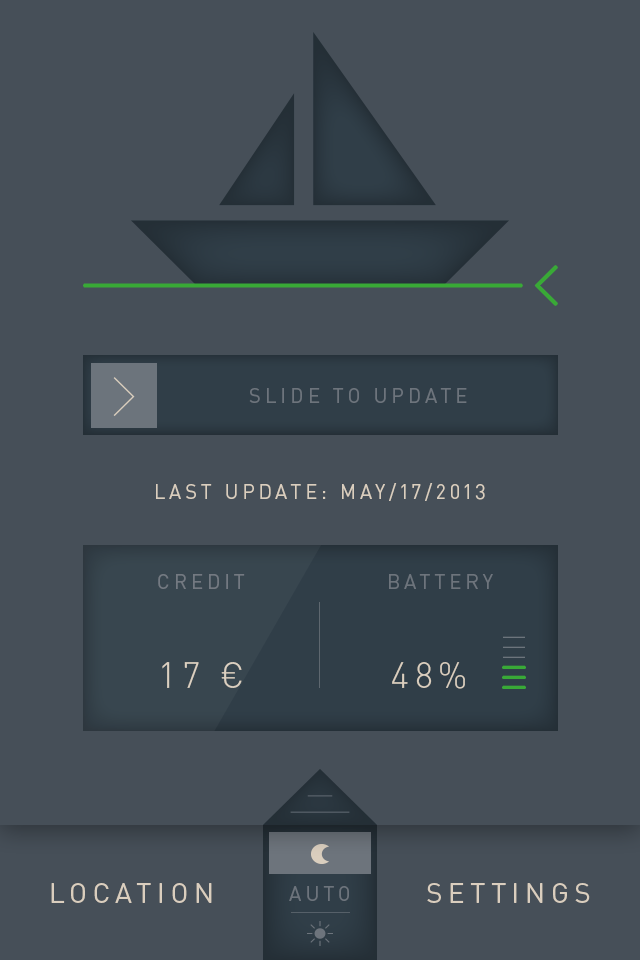
<style>
.page{position:relative;width:640px;height:960px;background:#464f58}
.page>*{position:absolute;margin:0}
.t1{font:20px "DINPro";letter-spacing:0.2em;color:#6d747c}
.t2{font:20px "DINPro";letter-spacing:0.2em;color:#dacebe}
.t3{font:20.3px "DINPro";letter-spacing:0.2em;color:#6d747c}
.t4{font:35.9px "DINPro-Light";letter-spacing:0.15em;color:#dacebe}
.t5{font:27.6px "DINPro";letter-spacing:0.2em;color:#dacebe}
.t6{font:28px "DINPro";letter-spacing:0.2em;color:#dacebe}
</style>
<div class="page">
<p class="t1" style="left:249px;top:388px;width:218px;height:15px">SLIDE TO UPDATE</p>
<p class="t2" style="left:156px;top:483px;width:329px;height:18px">LAST UPDATE: MAY/17/2013</p>
<p class="t3" style="left:158px;top:574px;width:87px;height:15px">CREDIT</p>
<p class="t3" style="left:389px;top:574px;width:104px;height:15px">BATTERY</p>
<p class="t4" style="left:162px;top:662px;width:80px;height:26px">17 €</p>
<p class="t4" style="left:392px;top:662px;width:73px;height:27px">48%</p>
<p class="t5" style="left:51px;top:883px;width:161px;height:20px">LOCATION</p>
<p class="t3" style="left:289px;top:886px;width:60px;height:15px">AUTO</p>
<p class="t6" style="left:427px;top:883px;width:163px;height:20px">SETTINGS</p>
</div>
